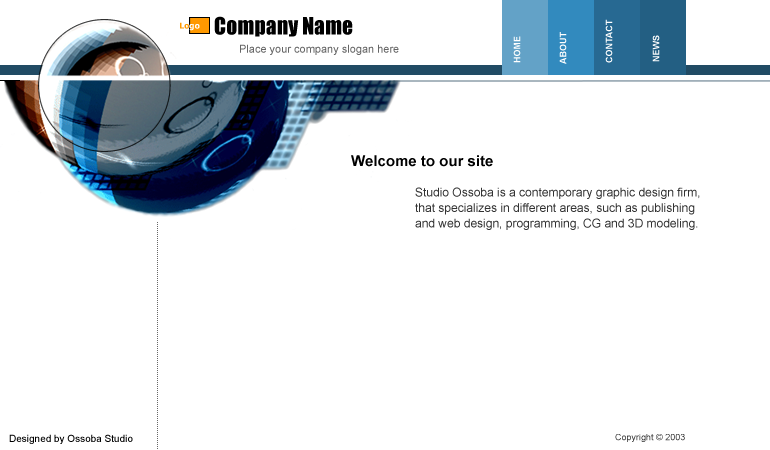
<style>
.page{position:relative;width:770px;height:450px;background:#ffffff}
.page>*{position:absolute;margin:0}
.t1{font:22px "Impact";color:#000000}
.t2{font:9px "Arial-BoldMT";color:#ffffff}
.t3{font:11px "ArialMT";color:#666666}
.t4{font:15px "Arial-BoldMT";color:#000000}
.t5{font:12px/15.5px "ArialMT";color:#333333}
.t6{font:10px "ArialMT";color:#000000}
.t7{font:9px "ArialMT";color:#333333}
</style>
<div class="page">
<p class="t1" style="left:214px;top:16px;width:139px;height:21px">Company Name</p>
<p class="t2" style="left:605px;top:19px;width:8px;height:44px;rotate:-90deg">CONTACT</p>
<p class="t2" style="left:513px;top:36px;width:8px;height:27px;rotate:-90deg">HOME</p>
<p class="t2" style="left:559px;top:32px;width:8px;height:32px;rotate:-90deg">ABOUT</p>
<p class="t2" style="left:652px;top:35px;width:8px;height:27px;rotate:-90deg">NEWS</p>
<p class="t3" style="left:240px;top:44px;width:159px;height:11px">Place your company slogan here</p>
<p class="t4" style="left:351px;top:155px;width:142px;height:12px">Welcome to our site</p>
<p class="t5" style="left:415px;top:187px;width:285px;height:43px">Studio Ossoba is a contemporary graphic design firm, <br>that specializes in different areas, such as publishing <br>and web design, programming, CG and 3D modeling.</p>
<p class="t6" style="left:9px;top:434px;width:124px;height:10px">Designed by Ossoba Studio</p>
<p class="t7" style="left:615px;top:434px;width:70px;height:8px">Copyright © 2003</p>
</div>
